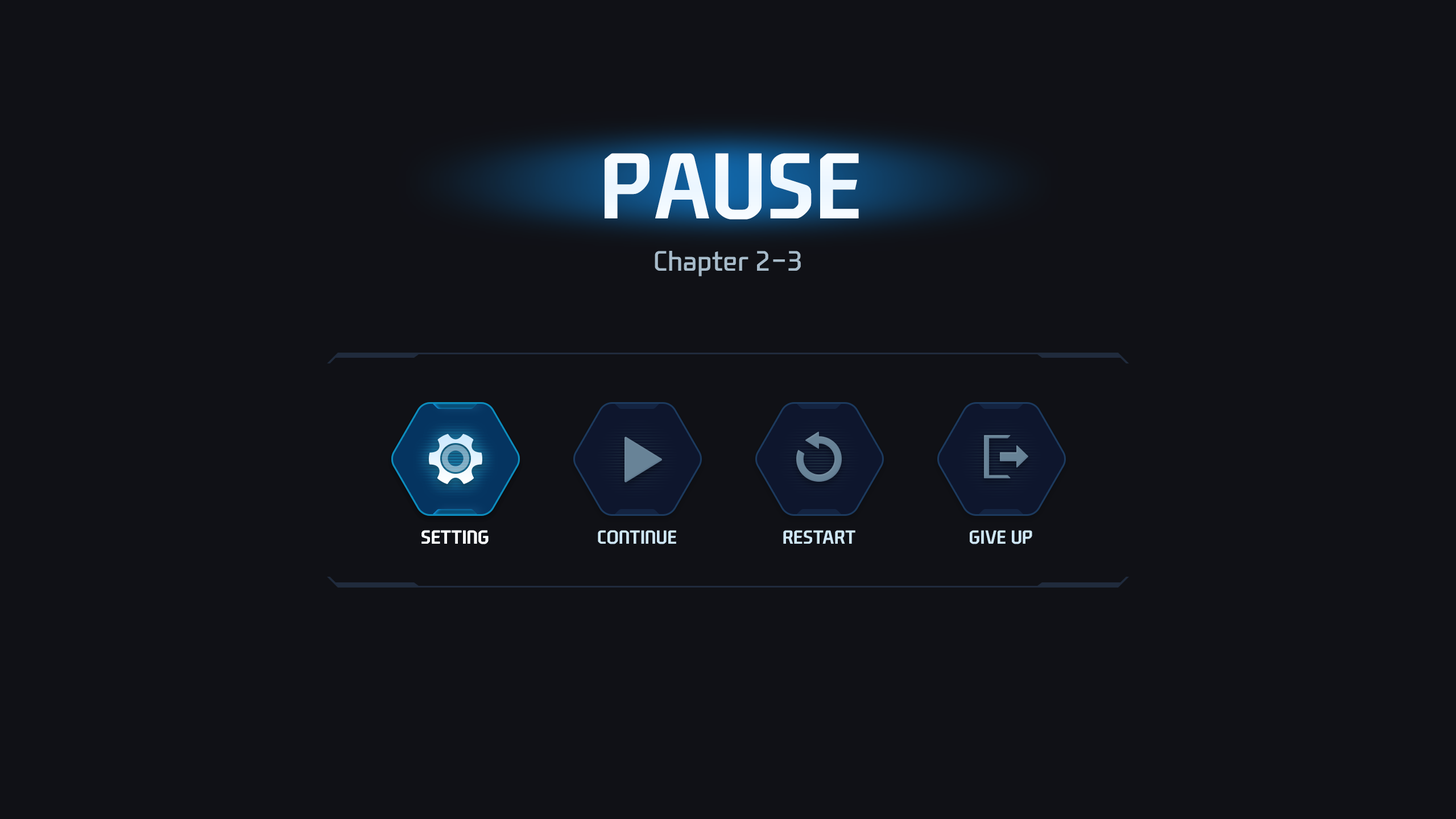
<style>
.page{position:relative;width:1456px;height:819px;background:#101116}
.page>*{position:absolute;margin:0}
.t1{font:89.5px "NEXONFootballGothicB";color:#ffffff;text-transform:uppercase}
.t2{font:27.3px "NEXONFootballGothicL";color:#a7bbca}
.t3{font:18.2px "NEXONFootballGothicB";color:#ffffff;text-transform:uppercase}
.t4{font:18.2px "NEXONFootballGothicB";color:#cfe7f7;text-transform:uppercase}
</style>
<div class="page">
<p class="t1" style="left:605px;top:153px;width:254px;height:67px">Pause</p>
<p class="t2" style="left:655px;top:251px;width:146px;height:25px">Chapter 2-3</p>
<p class="t3" style="left:421px;top:530px;width:68px;height:14px">Setting</p>
<p class="t3" style="left:421px;top:530px;width:68px;height:14px">Setting</p>
<p class="t4" style="left:598px;top:530px;width:78px;height:14px">Continue</p>
<p class="t4" style="left:783px;top:530px;width:72px;height:14px">Restart</p>
<p class="t4" style="left:970px;top:530px;width:62px;height:14px">Give up</p>
</div>
